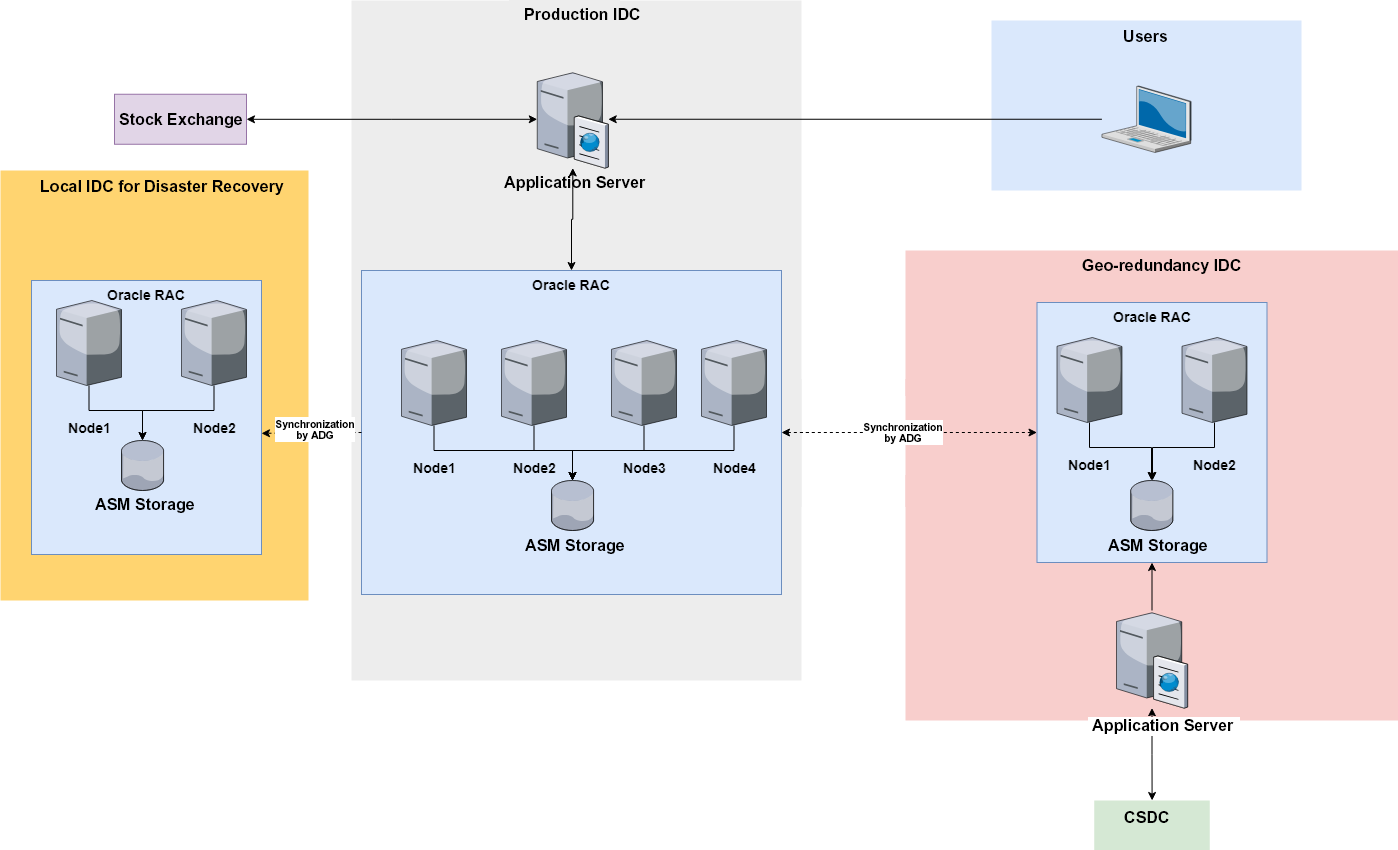
<style>
.page{position:relative;width:1398px;height:850px;background:#ffffff}
.page>*{position:absolute;margin:0}
.t1{font:16px "Arial-BoldMT";color:#000000}
.t2{font:10.2px/11.5px "Arial-BoldMT";color:#000000}
</style>
<div class="page">
<p class="t1" style="left:525px;top:8px;width:115px;height:12px">Production IDC</p>
<p class="t1" style="left:1124px;top:30px;width:43px;height:12px">Users</p>
<p class="t1" style="left:119px;top:113px;width:123px;height:15px">Stock Exchange</p>
<p class="t1" style="left:41px;top:180px;width:243px;height:15px">Local IDC for Disaster Recovery</p>
<p class="t1" style="left:504px;top:176px;width:142px;height:15px">Application Server</p>
<p class="t1" style="left:1082px;top:259px;width:159px;height:15px">Geo-redundancy IDC</p>
<p class="t2" style="left:275px;top:420px;width:79px;height:21px;text-align:center">Synchronization<br>by ADG</p>
<p class="t2" style="left:863px;top:423px;width:79px;height:21px;text-align:center">Synchronization<br>by ADG</p>
<p class="t1" style="left:95px;top:498px;width:99px;height:15px">ASM Storage</p>
<p class="t1" style="left:525px;top:539px;width:99px;height:15px">ASM Storage</p>
<p class="t1" style="left:1108px;top:539px;width:99px;height:15px">ASM Storage</p>
<p class="t1" style="left:1092px;top:719px;width:142px;height:15px">Application Server</p>
<p class="t1" style="left:1124px;top:811px;width:45px;height:12px">CSDC</p>
</div>
